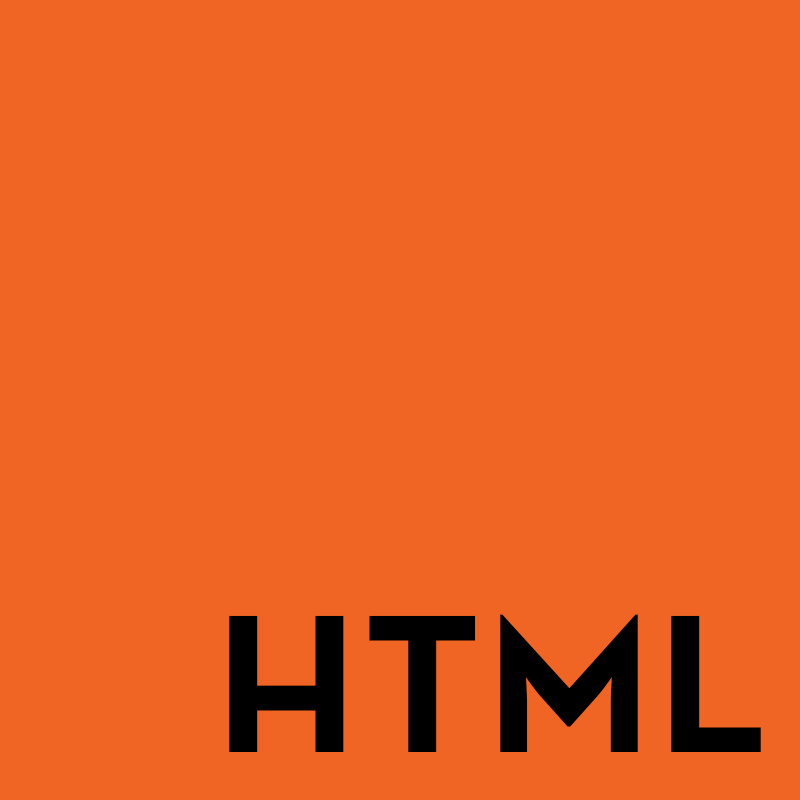
<style>
.page{position:relative;width:800px;height:800px;background:#f16524}
.page>*{position:absolute;margin:0}
.t1{font:200px "NeutraText-Bold";letter-spacing:0.025em;color:#000000}
</style>
<div class="page">
<p class="t1" style="left:229px;top:614px;width:532px;height:138px">HTML</p>
</div>
